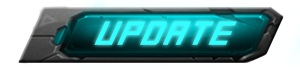
<style>
.page{position:relative;width:300px;height:70px}
.page>*{position:absolute;margin:0}
.t1{font:36.4px "SquareFont";letter-spacing:0.05em;color:#31ffff}
</style>
<div class="page">
<p class="t1" style="left:94px;top:22px;width:143px;height:24px">update</p>
<p class="t1" style="left:94px;top:21px;width:143px;height:24px">update</p>
</div>
